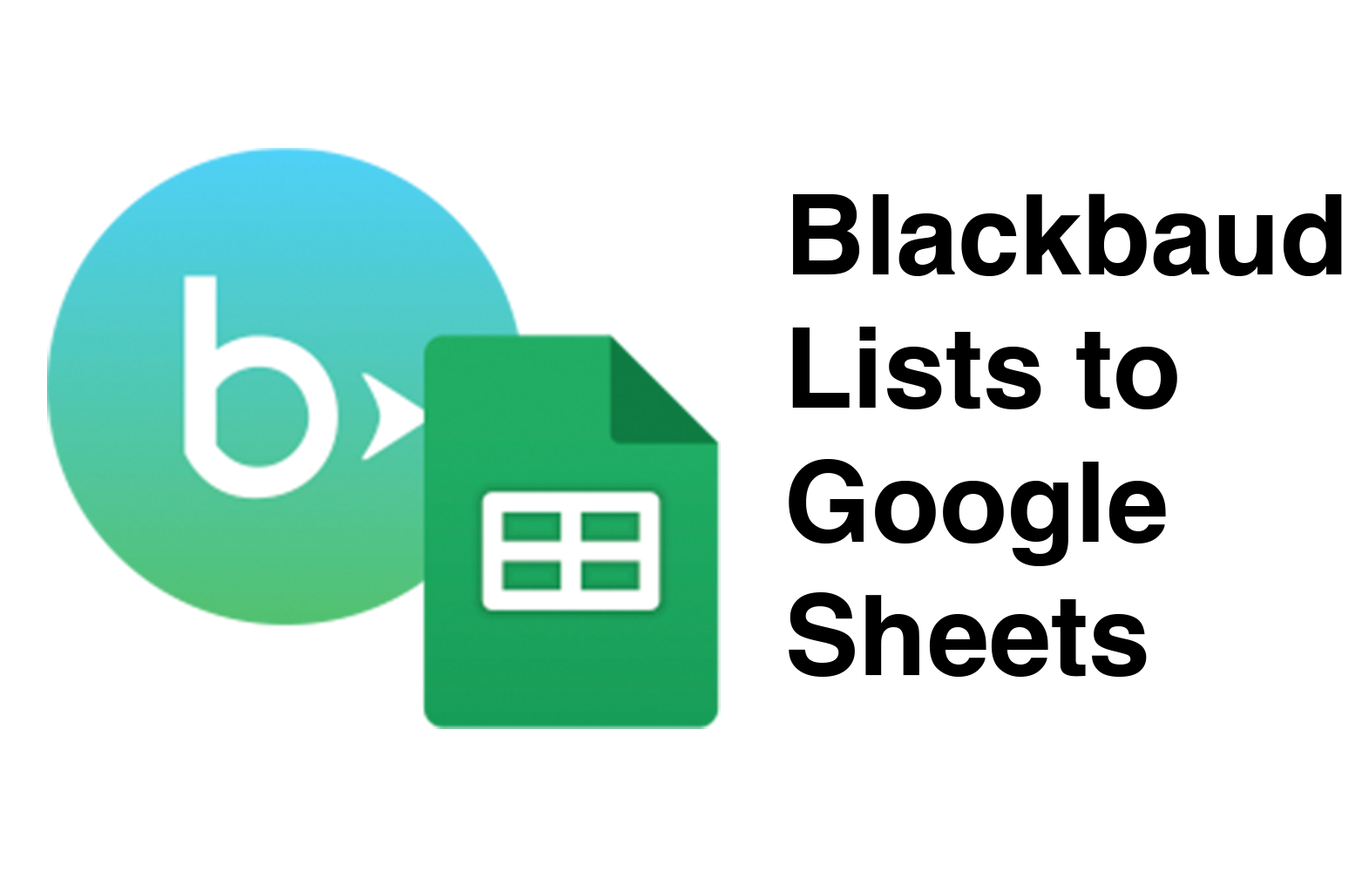
<style>
.page{position:relative;width:1369px;height:871px;background:#ffffff}
.page>*{position:absolute;margin:0}
.t1{font:111.5px "Helvetica-Bold";color:#000000}
</style>
<div class="page">
<p class="t1" style="left:788px;top:193px;width:554px;height:484px">Blackbaud<br>Lists to<br>Google<br>Sheets</p>
</div>
